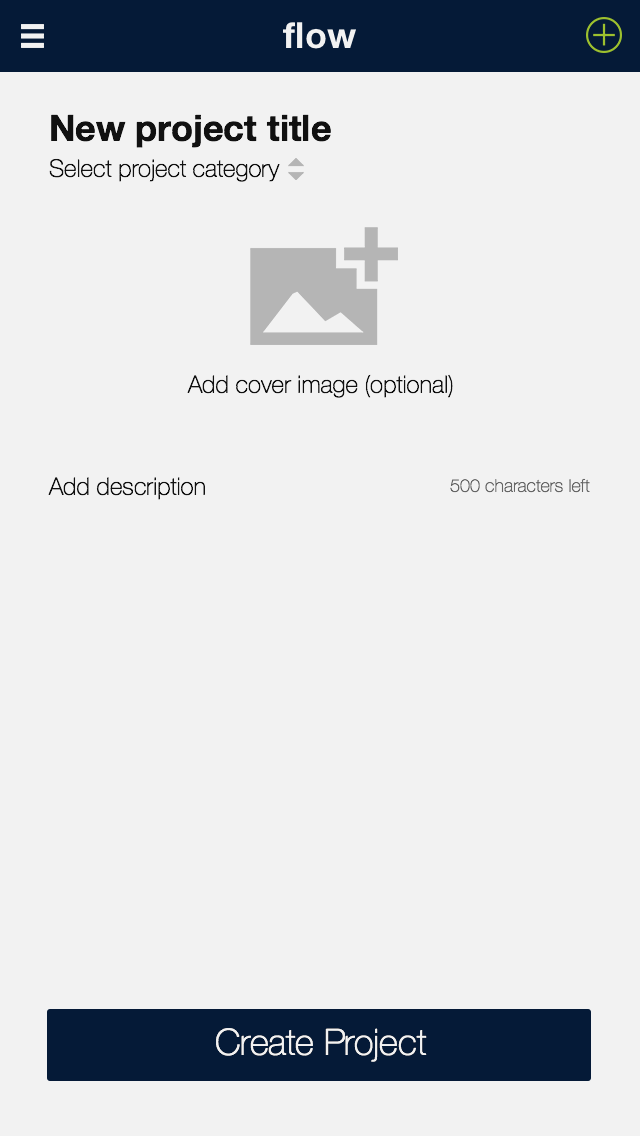
<style>
.page{position:relative;width:640px;height:1136px;background:#f2f2f2}
.page>*{position:absolute;margin:0}
.t1{font:36px "HelveticaNeue-Bold";color:#f2f2f2}
.t2{font:36px "HelveticaNeue-Bold";color:#111111}
.t3{font:24px "HelveticaNeue-Thin";color:#111111}
.t4{font:18px "HelveticaNeue-Thin";color:#666666}
.t5{font:36px "HelveticaNeue-Thin";color:#f2f2f2}
</style>
<div class="page">
<p class="t1" style="left:283px;top:22px;width:73px;height:27px">flow</p>
<p class="t2" style="left:51px;top:114px;width:280px;height:34px">New project title</p>
<p class="t3" style="left:49px;top:158px;width:231px;height:24px">Select project category</p>
<p class="t3" style="left:187px;top:374px;width:266px;height:24px">Add cover image (optional)</p>
<p class="t3" style="left:48px;top:477px;width:157px;height:23px">Add description</p>
<p class="t4" style="left:450px;top:478px;width:140px;height:15px">500 characters left</p>
<p class="t5" style="left:216px;top:1028px;width:211px;height:34px">Create Project</p>
</div>
